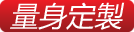
<style>
.page{position:relative;width:134px;height:32px}
.page>*{position:absolute;margin:0}
.t1{font:28px "MicrosoftYaHei";color:#ffffff;font-style:italic}
</style>
<div class="page">
<p class="t1" style="left:10px;top:2px;width:115px;height:28px">量身定製</p>
</div>
